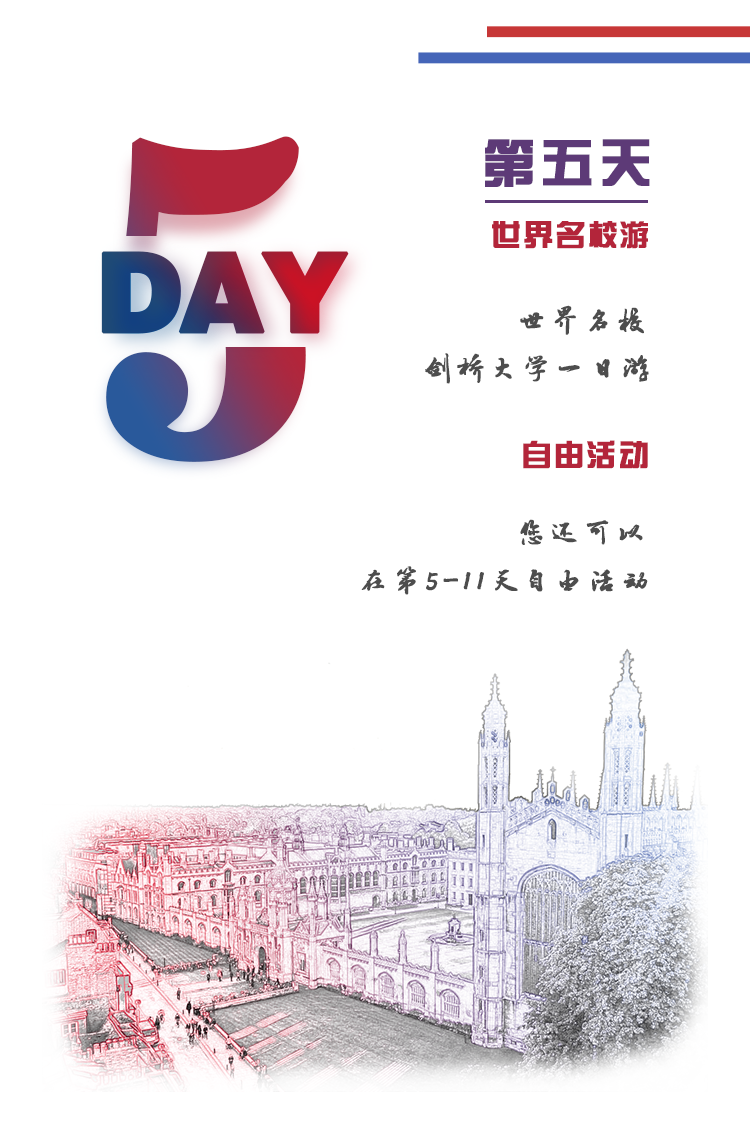
<style>
.page{position:relative;width:750px;height:1140px;background:#ffffff}
.page>*{position:absolute;margin:0}
.t1{font:432.9px "News706BT-BoldC";letter-spacing:-0.05em;font-weight:bold}
.t2{font:52px "FZZYJW--GB1-0";letter-spacing:0.1em;color:#5d3a77;font-weight:bold}
.t3{font:30px "FZZYJW--GB1-0";letter-spacing:0.05em;color:#b3253a;font-weight:bold}
.t4{font:110px "FZCCHJW--GB1-0";letter-spacing:-0.05em;font-weight:bold}
.t5{font:30px/48px "·½ÕýÂÀ½¨µÂ×ÖÌå";letter-spacing:0.075em;color:#4d4d4d;font-weight:bold}
</style>
<div class="page">
<p class="t1" style="left:106px;top:136px;width:200px;height:326px">5</p>
<p class="t2" style="left:485px;top:139px;width:165px;height:48px">第五天</p>
<p class="t3" style="left:492px;top:221px;width:156px;height:28px">世界名校游</p>
<p class="t4" style="left:101px;top:251px;width:248px;height:83px">DAY</p>
<p class="t5" style="left:425px;top:305px;width:224px;height:79px">世界名校<br>剑桥大学一日游</p>
<p class="t3" style="left:523px;top:440px;width:125px;height:29px">自由活动</p>
<p class="t5" style="left:361px;top:519px;width:287px;height:76px">您还可以<br>在第5-11天自由活动</p>
</div>
